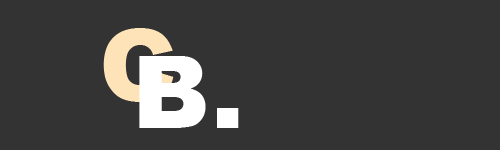
<style>
.page{position:relative;width:500px;height:150px;background:#333333}
.page>*{position:absolute;margin:0}
.t1{font:100px "Arial-Black";color:#ffe3b8}
.t2{font:100px "Arial-Black";color:#ffffff}
</style>
<div class="page">
<p class="t1" style="left:103px;top:28px;width:71px;height:74px">C</p>
<p class="t2" style="left:139px;top:56px;width:100px;height:72px">B.</p>
</div>
